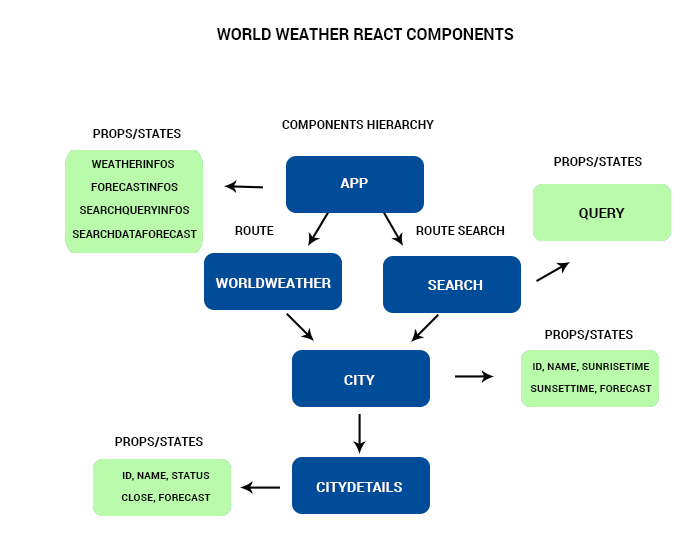
<style>
.page{position:relative;width:700px;height:560px;background:#ffffff}
.page>*{position:absolute;margin:0}
.t1{font:16px "Roboto-Bold";color:#060606;text-transform:uppercase}
.t2{font:12.2px "Roboto-Bold";color:#060606;text-transform:uppercase}
.t3{font:11px/23.4px "Roboto-Bold";color:#060606;text-transform:uppercase}
.t4{font:14.4px "Roboto-Bold";color:#ffffff;text-transform:uppercase}
.t5{font:14.3px "Roboto-Bold";color:#060606;text-transform:uppercase}
.t6{font:10.4px/22.1px "Roboto-Bold";color:#060606;text-transform:uppercase}
</style>
<div class="page">
<p class="t1" style="left:216px;top:28px;width:298px;height:12px">World Weather REACT COMPONENTS</p>
<p class="t2" style="left:282px;top:120px;width:152px;height:9px">Components Hierarchy</p>
<p class="t2" style="left:93px;top:129px;width:88px;height:10px">Props/states</p>
<p class="t3" style="left:72px;top:160px;width:125px;height:78px;text-align:center">weatherInfos <br>forecastInfos<br>searchQueryInfos<br>searchDataForecast</p>
<p class="t2" style="left:554px;top:157px;width:88px;height:10px">Props/states</p>
<p class="t4" style="left:340px;top:178px;width:28px;height:10px">APP</p>
<p class="t5" style="left:579px;top:208px;width:46px;height:12px">QUERY</p>
<p class="t2" style="left:235px;top:226px;width:39px;height:9px">Route</p>
<p class="t2" style="left:416px;top:226px;width:89px;height:9px">Route SEARCH</p>
<p class="t4" style="left:215px;top:278px;width:116px;height:10px">WorldWeather</p>
<p class="t4" style="left:428px;top:280px;width:55px;height:10px">SEARCH</p>
<p class="t2" style="left:545px;top:330px;width:88px;height:10px">Props/states</p>
<p class="t6" style="left:530px;top:363px;width:122px;height:31px;text-align:center">ID, name, sunrisetime<br>sunsettime, forecast</p>
<p class="t4" style="left:344px;top:375px;width:31px;height:10px">CITY</p>
<p class="t2" style="left:115px;top:437px;width:88px;height:10px">Props/states</p>
<p class="t6" style="left:121px;top:472px;width:90px;height:31px;text-align:center">ID, name, status<br>close, forecast</p>
<p class="t4" style="left:316px;top:482px;width:86px;height:10px">CITYDETAILS</p>
</div>
